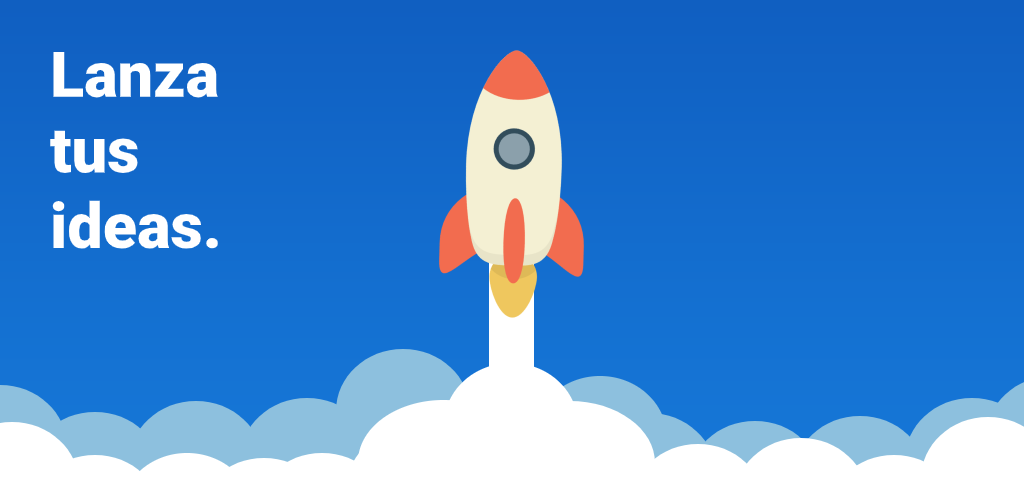
<style>
.page{position:relative;width:1024px;height:500px}
.page>*{position:absolute;margin:0}
.t1{font:63px "Roboto-Black";color:#ffffff}
</style>
<div class="page">
<p class="t1" style="left:50px;top:52px;width:168px;height:197px">Lanza<br>tus<br>ideas.</p>
</div>
